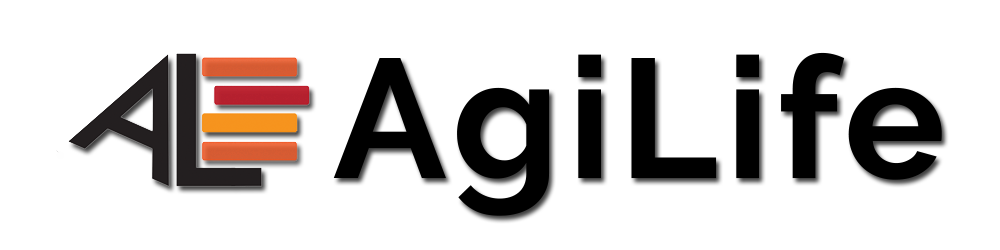
<style>
.page{position:relative;width:1000px;height:250px;background:#ffffff}
.page>*{position:absolute;margin:0}
.t1{font:168.5px "Raleway-Bold";letter-spacing:0.05em;color:#000000}
</style>
<div class="page">
<p class="t1" style="left:333px;top:52px;width:609px;height:164px">AgiLife</p>
</div>
